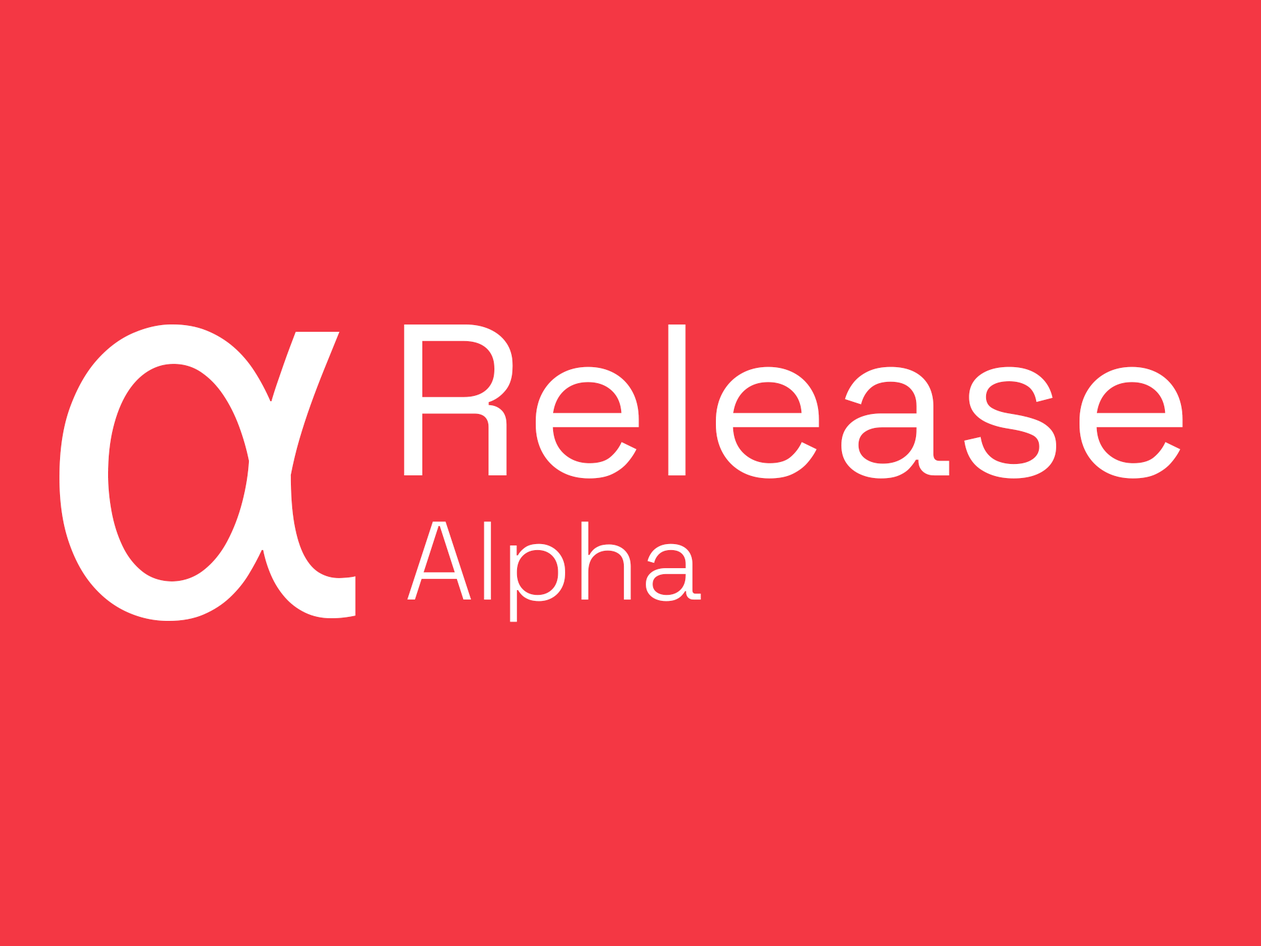
<style>
.page{position:relative;width:1261px;height:946px;background:#f43744}
.page>*{position:absolute;margin:0}
.t1{font:606.4px "Corbel";color:#ffffff}
.t2{font:215.3px "SpaceGrotesk-Regular";color:#ffffff}
.t3{font:111.1px "SpaceGrotesk-Light";color:#ffffff}
</style>
<div class="page">
<p class="t1" style="left:59px;top:324px;width:297px;height:297px">α</p>
<p class="t2" style="left:404px;top:324px;width:779px;height:154px">Release</p>
<p class="t3" style="left:407px;top:521px;width:294px;height:101px">Alpha</p>
</div>
